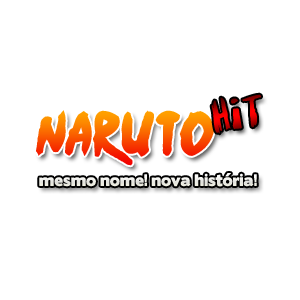
<style>
.page{position:relative;width:300px;height:300px;background:#ffffff}
.page>*{position:absolute;margin:0}
.t1{font:38px "Vaille3";text-transform:uppercase}
.t2{font:50px "Ninja-Naruto"}
.t3{font:15px "BorisBlackBloxx";color:#eeeee4}
</style>
<div class="page">
<p class="t1" style="left:211px;top:94px;width:50px;height:40px;rotate:-8deg">hit</p>
<p class="t2" style="left:36px;top:110px;width:178px;height:56px">naruto</p>
<p class="t3" style="left:39px;top:173px;width:218px;height:14px">mesmo nome! nova história!</p>
</div>
